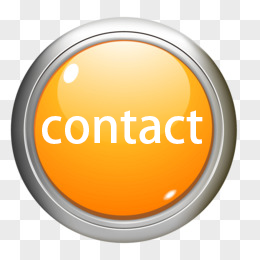
<style>
.page{position:relative;width:260px;height:260px}
.page>*{position:absolute;margin:0}
.t1{font:48px "AdobeHeitiStd-Regular";color:#ffffff}
</style>
<div class="page">
<p class="t1" style="left:42px;top:110px;width:161px;height:34px">contact</p>
</div>
